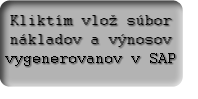
<style>
.page{position:relative;width:198px;height:99px;background:#b3b3b3}
.page>*{position:absolute;margin:0}
.t1{font:16px "Courier";color:#000000}
</style>
<div class="page">
<p class="t1" style="left:5px;top:15px;width:170px;height:51px;text-align:center">Kliktím vlož súbor nákladov a výnosov vygenerovanov v SAP</p>
</div>
